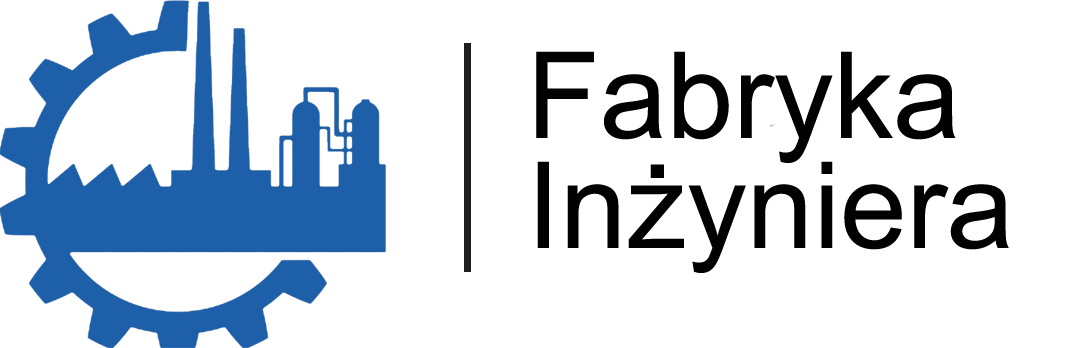
<style>
.page{position:relative;width:1065px;height:348px;background:#ffffff}
.page>*{position:absolute;margin:0}
.t1{font:120px/110px "ArialMT";color:#010101}
</style>
<div class="page">
<p class="t1" style="left:536px;top:51px;width:473px;height:222px">Fabryka<br>Inżyniera</p>
</div>
